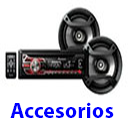
<style>
.page{position:relative;width:128px;height:128px;background:#ffffff}
.page>*{position:absolute;margin:0}
.t1{font:22px "MyriadPro-Bold";color:#0000ff}
</style>
<div class="page">
<p class="t1" style="left:10px;top:102px;width:104px;height:16px">Accesorios</p>
</div>
